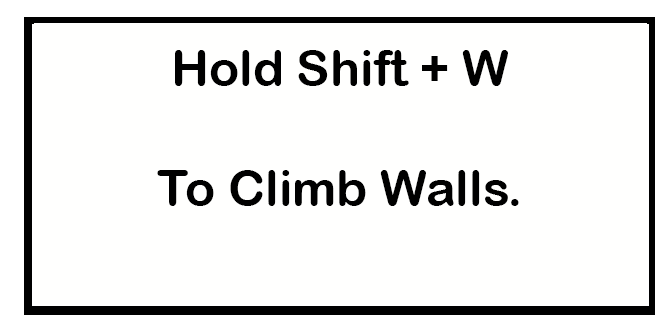
<style>
.page{position:relative;width:669px;height:320px;background:#fffffe}
.page>*{position:absolute;margin:0}
.t1{font:12px "ArialRoundedMTBold";color:#000000}
</style>
<div class="page">
<p class="t1" style="left:157px;top:50px;width:362px;height:156px;text-align:center">Hold Shift + W<br><br>To Climb Walls.</p>
</div>
